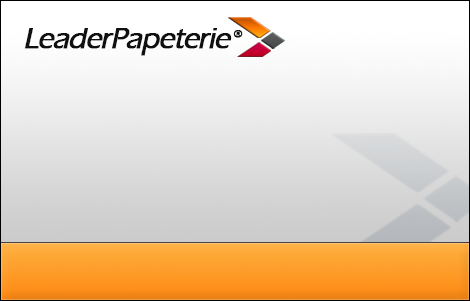
<style>
.page{position:relative;width:470px;height:301px}
.page>*{position:absolute;margin:0}
.t1{font:30.5px "ErasITC-Medium";letter-spacing:-0.05em;color:#101010;font-weight:bold;font-style:italic}
.t2{font:30.5px "ErasITC-Medium";letter-spacing:0.1em;color:#101010;font-weight:bold;font-style:italic}
.t3{font:18.3px "ErasITC-Medium";letter-spacing:-0.075em;color:#101010;font-weight:bold}
</style>
<div class="page">
<p class="t1" style="left:25px;top:28px;width:218px;height:28px">LeaderPapeteri<span class="t2">e</span><span class="t3">®</span></p>
</div>
